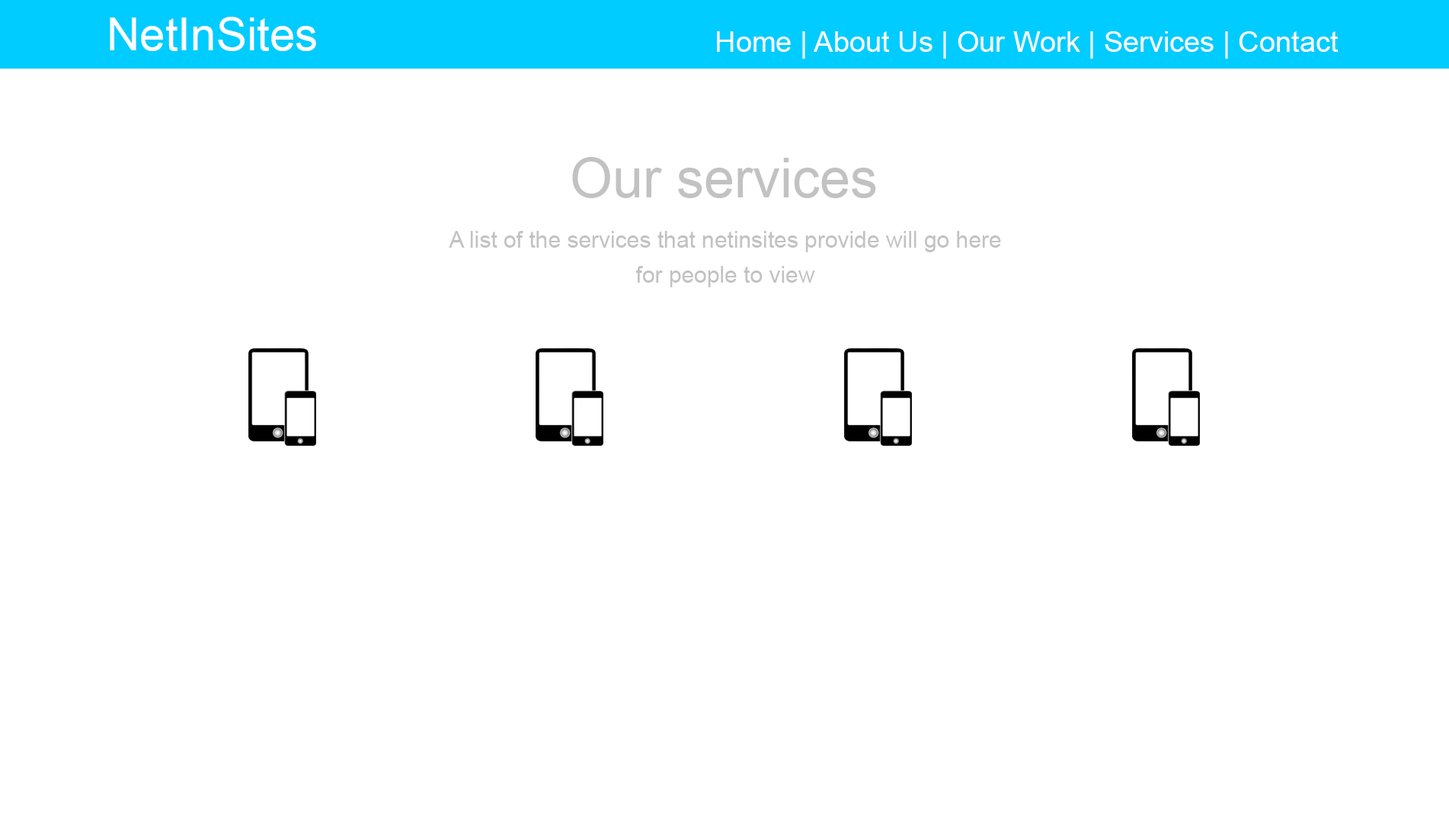
<style>
.page{position:relative;width:1449px;height:823px;background:#ffffff}
.page>*{position:absolute;margin:0}
.t1{font:45.7px "ArialMT";color:#ffffff}
.t2{font:29px "ArialMT";color:#ffffff}
.t3{font:54.9px "ArialMT";color:#c2c2c2}
.t4{font:22.9px/35px "ArialMT";color:#c2c2c2}
</style>
<div class="page">
<p class="t1" style="left:110px;top:17px;width:206px;height:34px">NetInSites</p>
<p class="t2" style="left:717px;top:31px;width:622px;height:28px">Home | About Us | Our Work | Services | Contact</p>
<p class="t3" style="left:572px;top:157px;width:304px;height:41px">Our services</p>
<p class="t4" style="left:449px;top:231px;width:552px;height:56px;text-align:center">A list of the services that netinsites provide will go here<br>for people to view</p>
</div>
